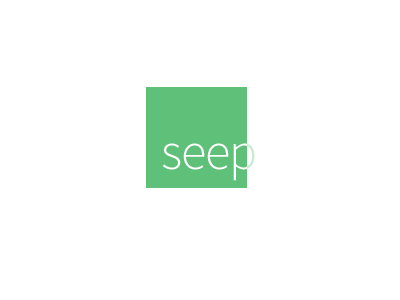
<style>
.page{position:relative;width:400px;height:300px;background:#ffffff}
.page>*{position:absolute;margin:0}
.t1{font:52px "SourceSansPro-Light";letter-spacing:-0.025em;color:#ffffff}
</style>
<div class="page">
<p class="t1" style="left:162px;top:143px;width:93px;height:38px">seep</p>
</div>
